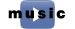
<style>
.page{position:relative;width:75px;height:29px;background:#ffffff}
.page>*{position:absolute;margin:0}
.t1{font:14px "Swiss721BT-Black";letter-spacing:0.2em;color:#000000}
</style>
<div class="page">
<p class="t1" style="left:8px;top:7px;width:58px;height:12px">music</p>
</div>
